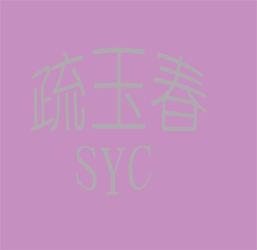
<style>
.page{position:relative;width:257px;height:250px;background:#c590bf}
.page>*{position:absolute;margin:0}
.t1{font:60px "YouYuan";color:#b0a9af}
.t2{font:52.9px "YouYuan";color:#b0a9af}
</style>
<div class="page">
<p class="t1" style="left:30px;top:47px;width:178px;height:85px">疏玉春</p>
<p class="t2" style="left:75px;top:144px;width:77px;height:51px">SYC</p>
</div>
